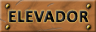
<style>
.page{position:relative;width:96px;height:32px}
.page>*{position:absolute;margin:0}
.t1{font:17.3px "Calibri-Bold";letter-spacing:0.005em;text-transform:uppercase;font-weight:bold}
</style>
<div class="page">
<p class="t1" style="left:8px;top:10px;width:81px;height:13px">elevador</p>
</div>
